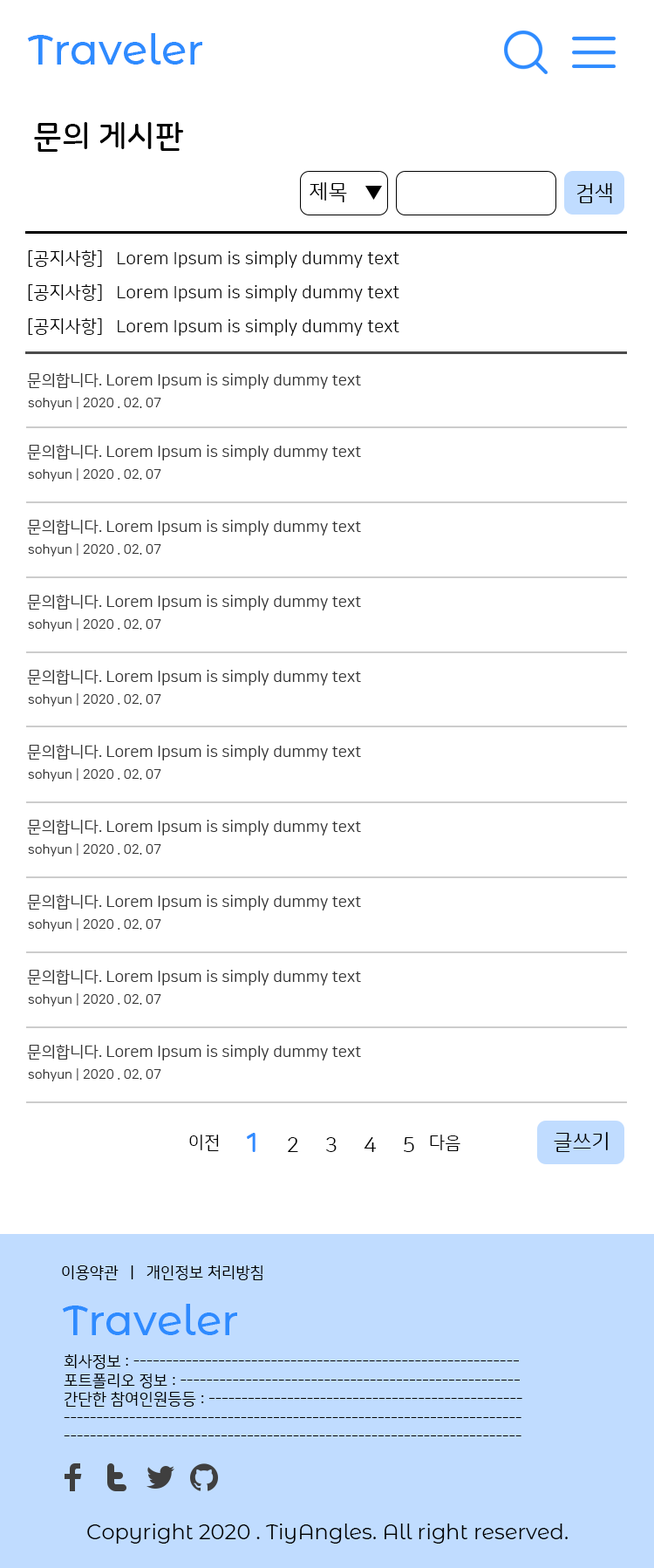
<style>
.page{position:relative;width:654px;height:1568px;background:#ffffff}
.page>*{position:absolute;margin:0}
.t1{font:41.9px "MontserratAlternates-Medium";color:#2e8bff}
.t2{font:31.4px "NanumSquareRoundB";color:#000000}
.t3{font:20.9px "NanumSquareRoundR";color:#000000}
.t4{font:17.4px "NanumSquareRoundR";color:#000000}
.t5{font:15.7px "NanumSquareRoundR";color:#343434}
.t6{font:13.1px "NanumSquareRoundR";color:#343434}
.t7{font:26.2px "NanumSquareRoundB";color:#2e8bff}
.t8{font:15.7px "NanumSquareRoundR";color:#000000}
.t9{font:20.9px "MontserratAlternates-Regular";color:#000000}
</style>
<div class="page">
<p class="t1" style="left:27px;top:33px;width:175px;height:32px">Traveler</p>
<p class="t2" style="left:34px;top:122px;width:150px;height:30px">문의 게시판</p>
<p class="t3" style="left:310px;top:182px;width:37px;height:20px">제목</p>
<p class="t3" style="left:577px;top:183px;width:35px;height:20px">검색</p>
<p class="t4" style="left:28px;top:250px;width:371px;height:18px">[공지사항]   Lorem Ipsum is simply dummy text</p>
<p class="t4" style="left:28px;top:284px;width:371px;height:18px">[공지사항]   Lorem Ipsum is simply dummy text</p>
<p class="t4" style="left:28px;top:318px;width:371px;height:18px">[공지사항]   Lorem Ipsum is simply dummy text</p>
<p class="t5" style="left:27px;top:373px;width:334px;height:16px">문의합니다. Lorem Ipsum is simply dummy text</p>
<p class="t6" style="left:28px;top:397px;width:133px;height:13px">sohyun | 2020 . 02. 07</p>
<p class="t5" style="left:27px;top:445px;width:334px;height:15px">문의합니다. Lorem Ipsum is simply dummy text</p>
<p class="t6" style="left:28px;top:468px;width:133px;height:13px">sohyun | 2020 . 02. 07</p>
<p class="t5" style="left:27px;top:520px;width:334px;height:15px">문의합니다. Lorem Ipsum is simply dummy text</p>
<p class="t6" style="left:28px;top:543px;width:133px;height:13px">sohyun | 2020 . 02. 07</p>
<p class="t5" style="left:27px;top:595px;width:334px;height:15px">문의합니다. Lorem Ipsum is simply dummy text</p>
<p class="t6" style="left:28px;top:618px;width:133px;height:13px">sohyun | 2020 . 02. 07</p>
<p class="t5" style="left:27px;top:670px;width:334px;height:15px">문의합니다. Lorem Ipsum is simply dummy text</p>
<p class="t6" style="left:28px;top:693px;width:133px;height:13px">sohyun | 2020 . 02. 07</p>
<p class="t5" style="left:27px;top:745px;width:334px;height:15px">문의합니다. Lorem Ipsum is simply dummy text</p>
<p class="t6" style="left:28px;top:768px;width:133px;height:13px">sohyun | 2020 . 02. 07</p>
<p class="t5" style="left:27px;top:820px;width:334px;height:15px">문의합니다. Lorem Ipsum is simply dummy text</p>
<p class="t6" style="left:28px;top:843px;width:133px;height:13px">sohyun | 2020 . 02. 07</p>
<p class="t5" style="left:27px;top:895px;width:334px;height:15px">문의합니다. Lorem Ipsum is simply dummy text</p>
<p class="t6" style="left:28px;top:918px;width:133px;height:13px">sohyun | 2020 . 02. 07</p>
<p class="t5" style="left:27px;top:970px;width:334px;height:15px">문의합니다. Lorem Ipsum is simply dummy text</p>
<p class="t6" style="left:28px;top:993px;width:133px;height:13px">sohyun | 2020 . 02. 07</p>
<p class="t5" style="left:27px;top:1045px;width:334px;height:15px">문의합니다. Lorem Ipsum is simply dummy text</p>
<p class="t6" style="left:28px;top:1068px;width:133px;height:13px">sohyun | 2020 . 02. 07</p>
<p class="t3" style="left:247px;top:1133px;width:167px;height:19px"><span class="t7">1</span>     2     3     4     5</p>
<p class="t3" style="left:554px;top:1132px;width:54px;height:20px">글쓰기</p>
<p class="t4" style="left:189px;top:1135px;width:30px;height:16px">이전</p>
<p class="t4" style="left:430px;top:1135px;width:30px;height:16px">다음</p>
<p class="t8" style="left:62px;top:1265px;width:200px;height:15px">이용약관   |   개인정보 처리방침</p>
<p class="t1" style="left:62px;top:1304px;width:175px;height:31px">Traveler</p>
<p class="t8" style="left:64px;top:1354px;width:458px;height:82px">회사정보 : -----------------------------------------------------------<br>포트폴리오 정보 : ----------------------------------------------------<br>간단한 참여인원등등 : ------------------------------------------------<br>----------------------------------------------------------------------<br>----------------------------------------------------------------------</p>
<p class="t9" style="left:87px;top:1524px;width:481px;height:20px">Copyright 2020 . TiyAngles. All right reserved.</p>
</div>
